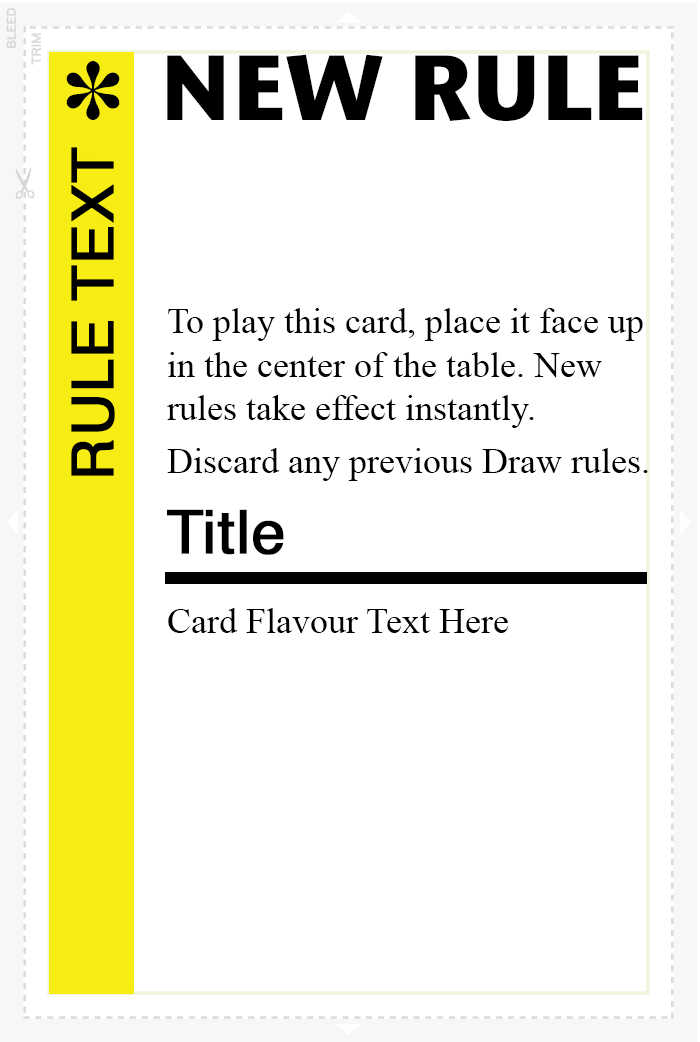
<style>
.page{position:relative;width:700px;height:1042px;background:#ffffff}
.page>*{position:absolute;margin:0}
.t1{font:92px "StoneSansITC-Bold";color:#000000}
.t2{font:82px "MS-Gothic";color:#000000}
.t3{font:58px "Helvetica";color:#000000;font-weight:bold}
.t4{font:36px "TimesNewRomanPSMT";color:#000000}
.t5{font:60px "Helvetica";color:#000000;font-weight:bold}
</style>
<div class="page">
<p class="t1" style="left:167px;top:54px;width:476px;height:67px">NEW RULE</p>
<p class="t2" style="left:66px;top:61px;width:54px;height:59px">✽</p>
<p class="t3" style="left:71px;top:147px;width:44px;height:329px;rotate:-90deg">RULE TEXT</p>
<p class="t4" style="left:167px;top:308px;width:476px;height:120px">To play this card, place it face up<br>in the center of the table. New <br>rules take effect instantly.</p>
<p class="t4" style="left:167px;top:448px;width:481px;height:33px">Discard any previous Draw rules.</p>
<p class="t5" style="left:167px;top:509px;width:117px;height:46px">Title</p>
<p class="t4" style="left:168px;top:608px;width:340px;height:25px">Card Flavour Text Here</p>
</div>
